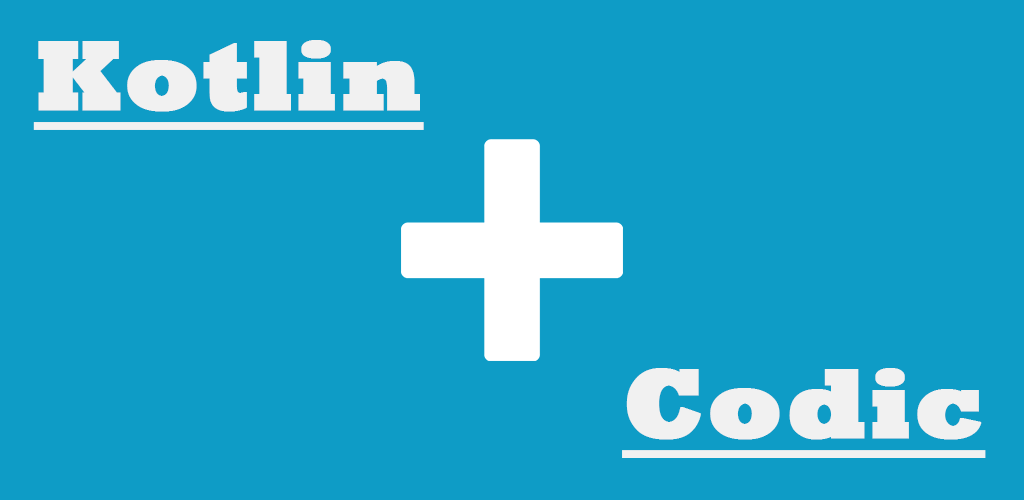
<style>
.page{position:relative;width:1024px;height:500px;background:#0e9cc6}
.page>*{position:absolute;margin:0}
.t1{font:100px "Rockwell-ExtraBold";letter-spacing:0.01em;color:#f1f1f1;font-weight:bold;text-decoration:underline}
</style>
<div class="page">
<p class="t1" style="left:33px;top:40px;width:391px;height:90px">Kotlin</p>
<p class="t1" style="left:622px;top:368px;width:364px;height:90px">Codic</p>
</div>
